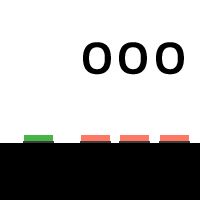
<style>
.page{position:relative;width:200px;height:200px;background:#ffffff}
.page>*{position:absolute;margin:0}
.t1{font:45.4px "Sansation-Bold";letter-spacing:0.1em;color:#000000}
</style>
<div class="page">
<p class="t1" style="left:83px;top:42px;width:101px;height:33px">000</p>
</div>
